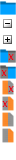
<style>
.page{position:relative;width:16px;height:160px;background:#ffffff}
.page>*{position:absolute;margin:0}
.t1{font:9px "FranklinGothic-Medium";color:#e60012}
</style>
<div class="page">
<p class="t1" style="left:8px;top:54px;width:6px;height:6px">X</p>
<p class="t1" style="left:1px;top:70px;width:6px;height:6px">X</p>
<p class="t1" style="left:8px;top:86px;width:6px;height:6px">X</p>
<p class="t1" style="left:2px;top:101px;width:6px;height:6px">X</p>
</div>
